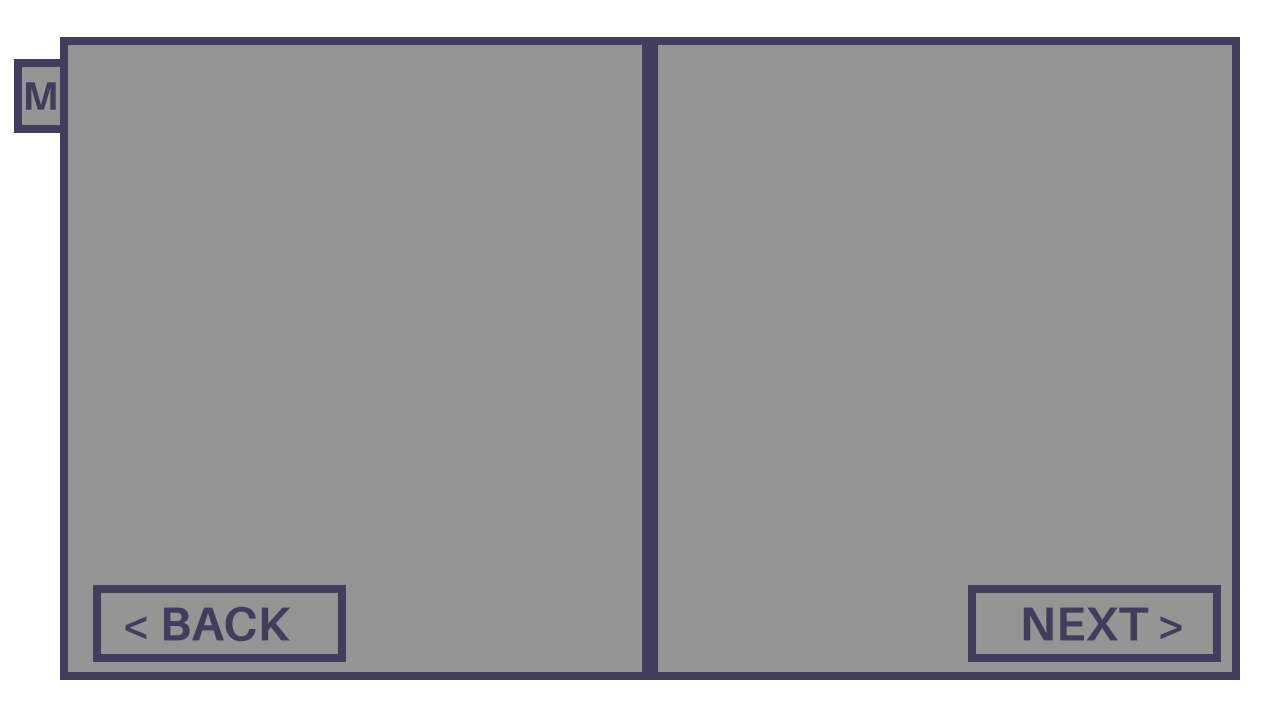
<style>
.page{position:relative;width:1280px;height:720px;background:#959595}
.page>*{position:absolute;margin:0}
.t1{font:40px "Aileron-Bold";color:#413d5c}
.t2{font:48px "Aileron-Bold";color:#413d5c}
</style>
<div class="page">
<p class="t1" style="left:26px;top:82px;width:30px;height:28px">M</p>
<p class="t2" style="left:125px;top:606px;width:166px;height:36px">&lt; BACK</p>
<p class="t2" style="left:1023px;top:607px;width:159px;height:34px">NEXT &gt;</p>
</div>
